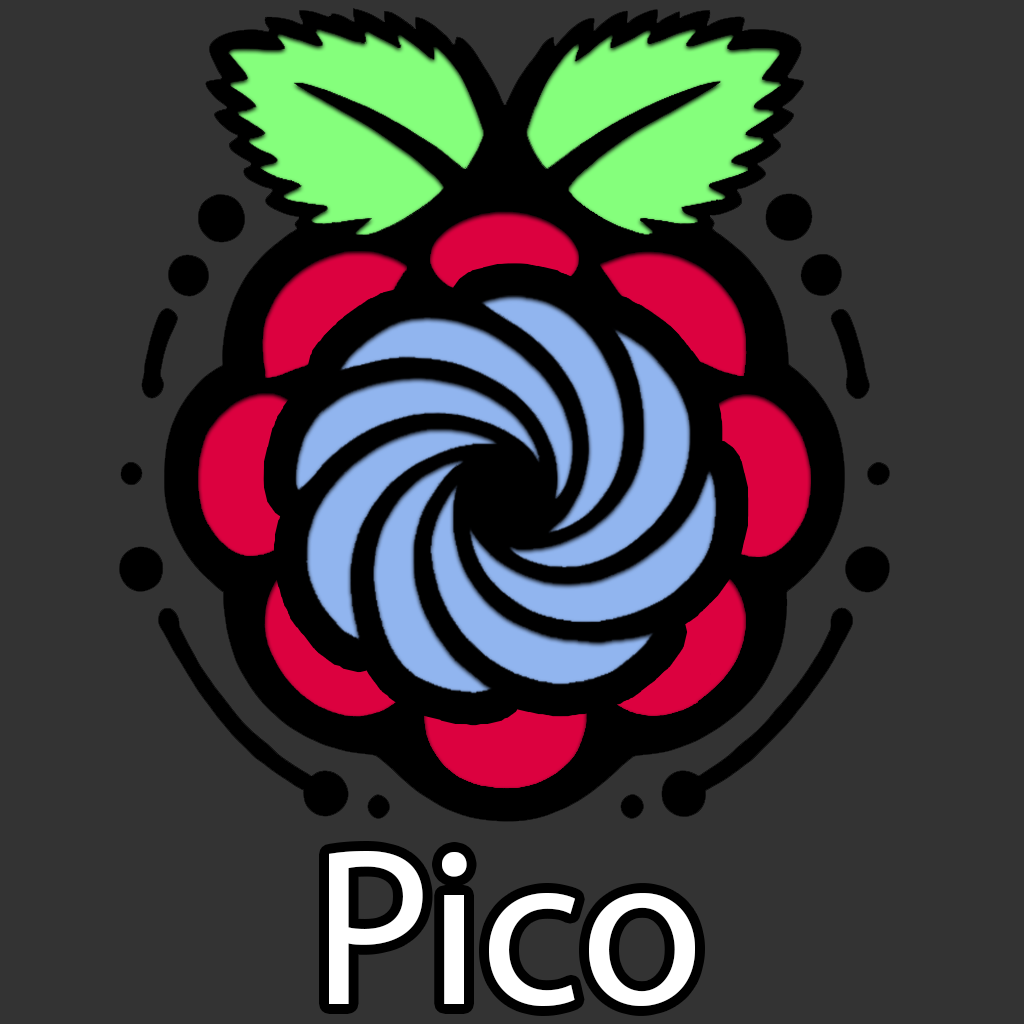
<style>
.page{position:relative;width:1024px;height:1024px;background:#333333}
.page>*{position:absolute;margin:0}
.t1{font:225px "MyriadPro-Regular";color:#ffffff}
</style>
<div class="page">
<p class="t1" style="left:329px;top:851px;width:366px;height:155px">Pico</p>
</div>
